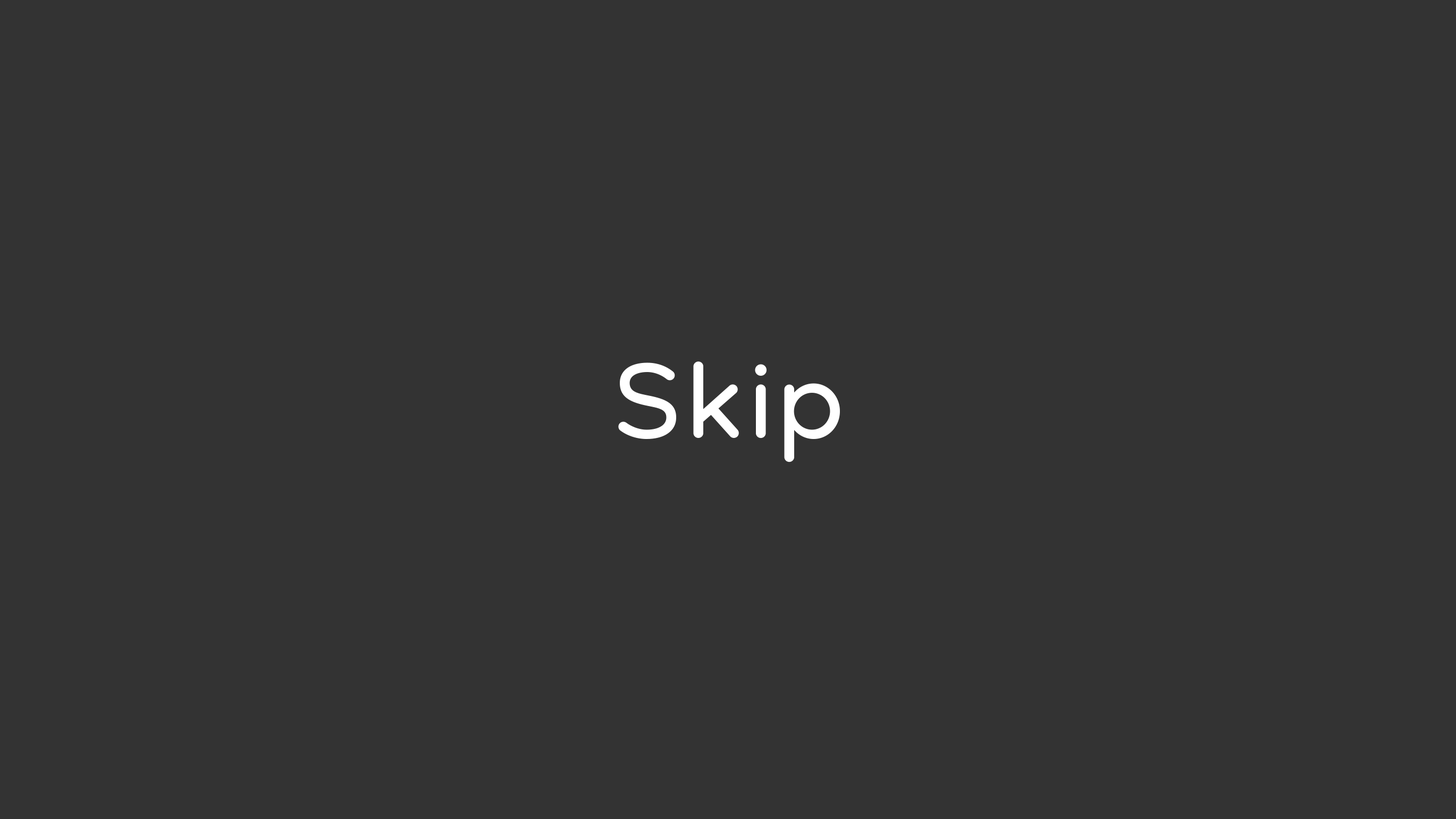
<style>
.page{position:relative;width:1456px;height:819px;background:#333333}
.page>*{position:absolute;margin:0}
.t1{font:109.2px "PollyRounded-Regular";color:#ffffff}
</style>
<div class="page">
<p class="t1" style="left:618px;top:361px;width:222px;height:101px">Skip</p>
</div>
